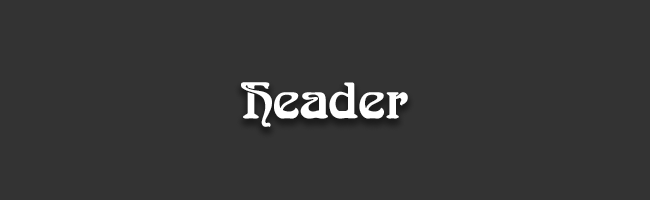
<style>
.page{position:relative;width:650px;height:200px;background:#333333}
.page>*{position:absolute;margin:0}
.t1{font:50px "BoecklinsUniverse";color:#ffffff}
</style>
<div class="page">
<p class="t1" style="left:241px;top:82px;width:167px;height:45px">Header</p>
</div>
